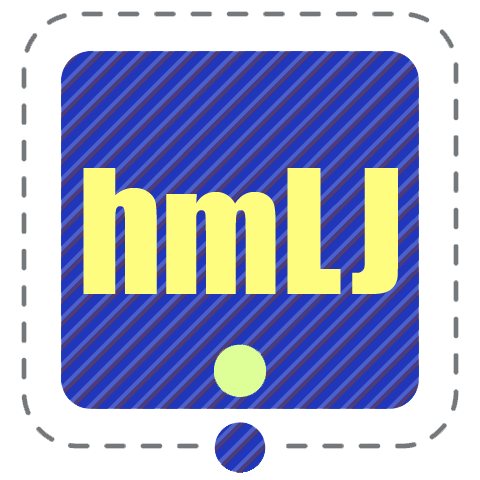
<style>
.page{position:relative;width:480px;height:480px;background:#ffffff}
.page>*{position:absolute;margin:0}
.t1{font:160px "Impact";color:#fffd7f}
.t2{font:155px "Impact";color:#fffd7f}
</style>
<div class="page">
<p class="t1" style="left:78px;top:151px;width:325px;height:196px">h<span class="t2">m</span>L J</p>
</div>
